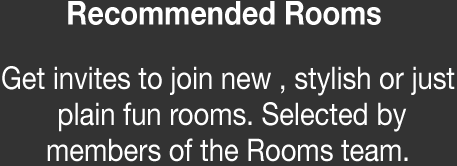
<style>
.page{position:relative;width:457px;height:166px;background:#333333}
.page>*{position:absolute;margin:0}
.t1{font:33.1px "HelveticaNeue-Bold";color:#ffffff;scale:0.87 1}
.t2{font:31.3px/36px "HelveticaNeue";color:#ffffff;scale:0.87 1}
</style>
<div class="page">
<p class="t1" style="left:68px;top:1px;width:313px;height:24px">Recommended Rooms</p>
<p class="t2" style="left:2px;top:66px;width:453px;height:96px;text-align:center">Get invites to join new , stylish or just <br>plain fun rooms. Selected by<br>members of the Rooms team.</p>
</div>
